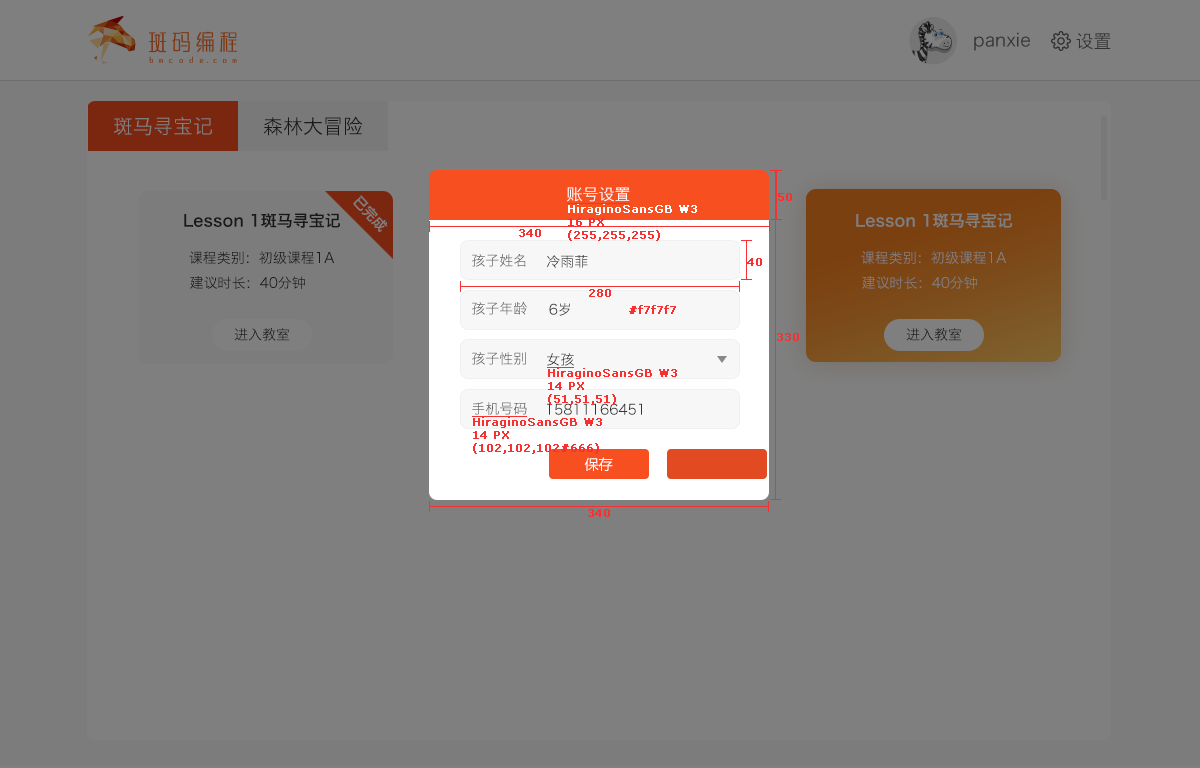
<style>
.page{position:relative;width:1200px;height:768px;background:#7f7f7f}
.page>*{position:absolute;margin:0}
.t1{font:18px "HiraginoSansGB-W3";color:#333333}
.t2{font:20px "HiraginoSansGB-W3";color:#7f7f7f}
.t3{font:20px "HiraginoSansGB-W3";color:#191919}
.t4{font:14px "HiraginoSansGB-W6";color:#7f7f7f}
.t5{font:16px "HiraginoSansGB-W3";color:#ffffff}
.t6{font:11px "Verdana";color:#f83030;font-weight:bold}
.t7{font:16px "HiraginoSansGB-W6";color:#191919}
.t8{font:16px "HiraginoSansGB-W6";color:#7f7f7f}
.t9{font:14px "HiraginoSansGB-W3";color:#191919}
.t10{font:14px "HiraginoSansGB-W3";color:#666666}
.t11{font:14px "HiraginoSansGB-W3";color:#333333}
.t12{font:14px "HiraginoSansGB-W3";color:#7f7f7f}
.t13{font:14px "MicrosoftYaHei";color:#ffffff}
</style>
<div class="page">
<p class="t1" style="left:974px;top:32px;width:56px;height:19px">panxie</p>
<p class="t1" style="left:1076px;top:33px;width:35px;height:17px">设置</p>
<p class="t2" style="left:114px;top:116px;width:98px;height:20px">斑马寻宝记</p>
<p class="t3" style="left:263px;top:116px;width:100px;height:20px">森林大冒险</p>
<p class="t4" style="left:353px;top:195px;width:35px;height:37px;rotate:47deg">已完成</p>
<p class="t5" style="left:567px;top:187px;width:63px;height:15px">账号设置</p>
<p class="t6" style="left:778px;top:193px;width:14px;height:8px">50</p>
<p class="t7" style="left:184px;top:212px;width:156px;height:16px">Lesson 1斑马寻宝记</p>
<p class="t8" style="left:856px;top:212px;width:156px;height:16px">Lesson 1斑马寻宝记</p>
<p class="t6" style="left:519px;top:229px;width:22px;height:8px">340</p>
<p class="t9" style="left:189px;top:251px;width:146px;height:14px">课程类别：初级课程1A</p>
<p class="t10" style="left:472px;top:254px;width:54px;height:13px">孩子姓名</p>
<p class="t11" style="left:546px;top:255px;width:42px;height:13px">冷雨菲</p>
<p class="t12" style="left:861px;top:251px;width:146px;height:14px">课程类别：初级课程1A</p>
<p class="t6" style="left:747px;top:258px;width:15px;height:8px">40</p>
<p class="t9" style="left:190px;top:276px;width:115px;height:13px">建议时长：40分钟</p>
<p class="t12" style="left:862px;top:276px;width:115px;height:13px">建议时长：40分钟</p>
<p class="t6" style="left:589px;top:289px;width:22px;height:8px">280</p>
<p class="t10" style="left:472px;top:301px;width:55px;height:14px">孩子年龄</p>
<p class="t11" style="left:549px;top:303px;width:21px;height:13px">6岁</p>
<p class="t6" style="left:629px;top:305px;width:47px;height:9px">#f7f7f7</p>
<p class="t11" style="left:234px;top:327px;width:56px;height:14px">进入教室</p>
<p class="t11" style="left:906px;top:327px;width:56px;height:14px">进入教室</p>
<p class="t6" style="left:777px;top:333px;width:22px;height:8px">330</p>
<p class="t10" style="left:472px;top:352px;width:54px;height:13px">孩子性别</p>
<p class="t11" style="left:547px;top:353px;width:27px;height:13px">女孩</p>
<p class="t6" style="left:548px;top:368px;width:129px;height:37px">HiraginoSansGB W3<br>14 PX<br>(51,51,51)</p>
<p class="t10" style="left:472px;top:402px;width:55px;height:13px">手机号码</p>
<p class="t11" style="left:547px;top:403px;width:95px;height:12px">15811166451</p>
<p class="t6" style="left:473px;top:417px;width:129px;height:37px">HiraginoSansGB W3<br>14 PX<br>(102,102,102#666)</p>
<p class="t13" style="left:584px;top:457px;width:29px;height:14px">保存</p>
<p class="t6" style="left:588px;top:509px;width:22px;height:8px">340</p>
</div>
